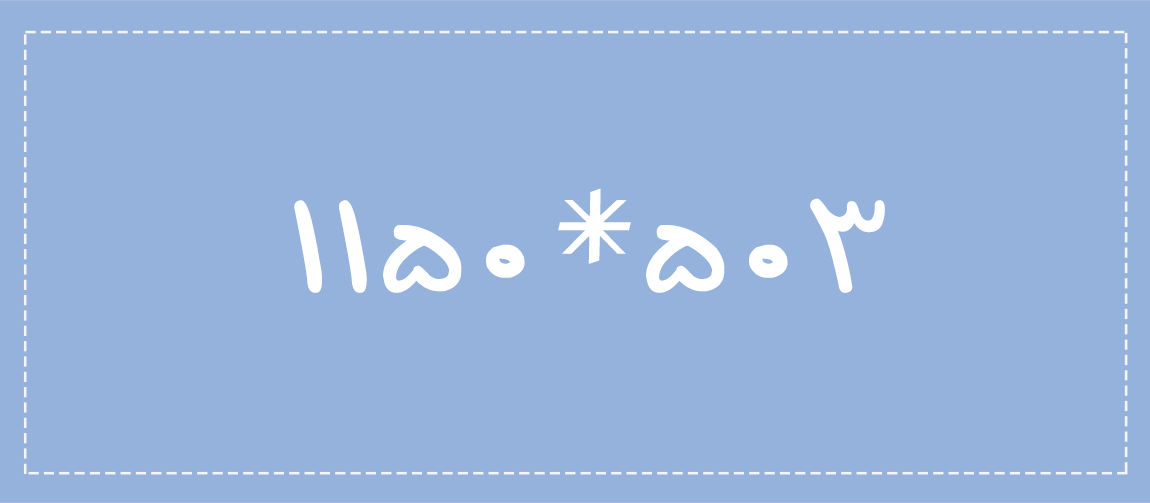
<style>
.page{position:relative;width:1150px;height:503px;background:#95b2dd}
.page>*{position:absolute;margin:0}
.t1{font:171.6px "IRDastNevis";color:#ffffff;font-weight:bold}
</style>
<div class="page">
<p class="t1" style="left:294px;top:188px;width:591px;height:105px">503*1150</p>
</div>
